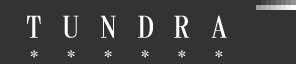
<style>
.page{position:relative;width:296px;height:64px;background:#333333}
.page>*{position:absolute;margin:0}
.t1{font:30px "HGMinchoB";letter-spacing:0.62em;color:#ffffff;text-transform:uppercase;scale:1.1 1}
.t2{font:14px "HGMinchoB";letter-spacing:1.9em;color:#ffffff;text-transform:uppercase;scale:1.1 1}
.t3{font:14px "HGMinchoB";letter-spacing:1.89em;color:#ffffff;text-transform:uppercase;scale:1.1 1}
</style>
<div class="page">
<p class="t1" style="left:27px;top:15px;width:200px;height:23px">Tundra</p>
<p class="t2" style="left:30px;top:50px;width:193px;height:8px">***<span class="t3">*</span>**</p>
</div>
